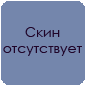
<style>
.page{position:relative;width:86px;height:86px;background:#7486ac}
.page>*{position:absolute;margin:0}
.t1{font:14px "CenturyGothic";color:#200428}
</style>
<div class="page">
<p class="t1" style="left:3px;top:27px;width:79px;height:29px;text-align:center">Скин<br>отсутствует</p>
</div>
